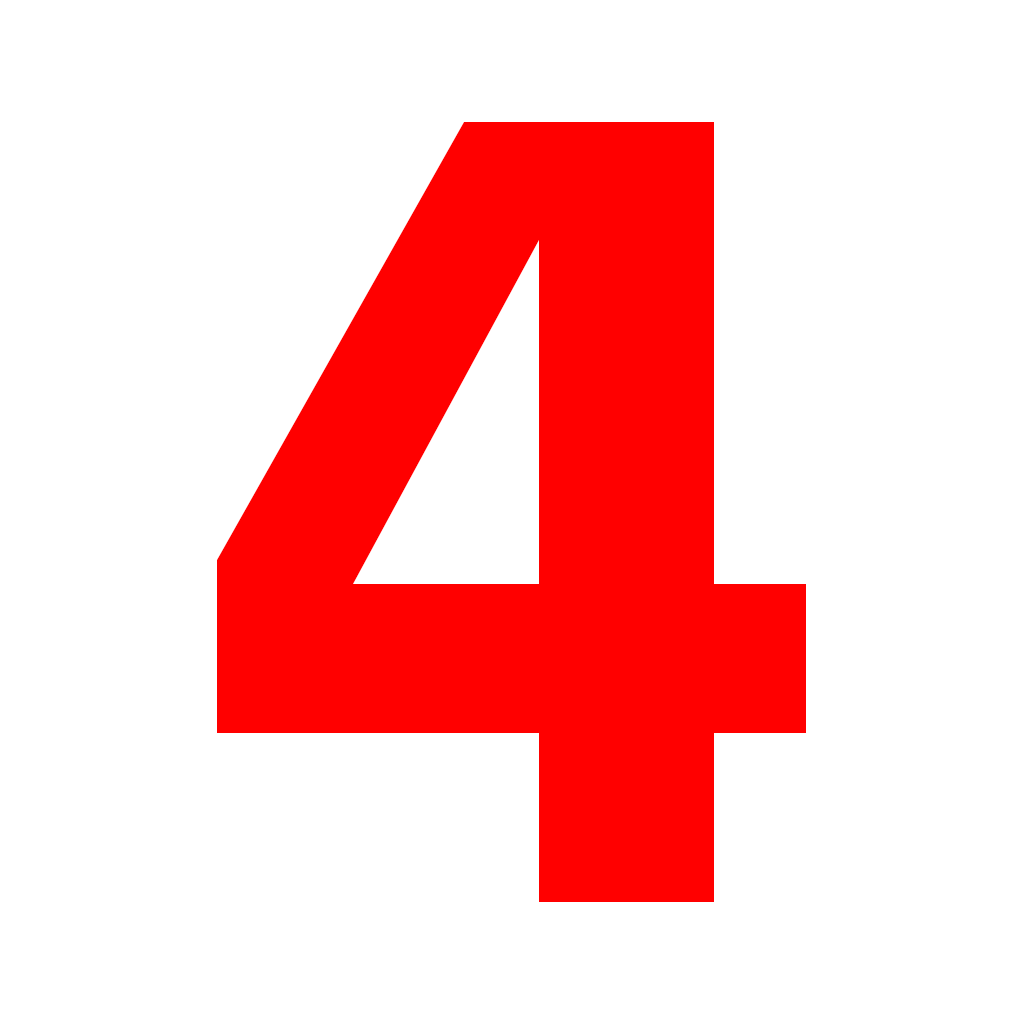
<style>
.page{position:relative;width:1024px;height:1024px;background:#ffffff}
.page>*{position:absolute;margin:0}
.t1{font:1000px "ToppanBunkyuMidashiGothicStdN-ExtraBold";color:#ff0000}
</style>
<div class="page">
<p class="t1" style="left:217px;top:122px;width:589px;height:780px">4</p>
</div>
